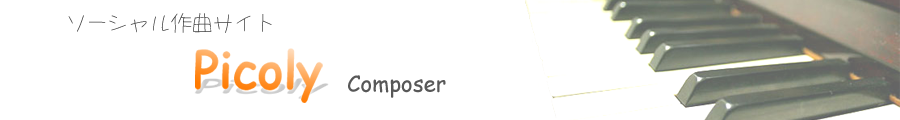
<style>
.page{position:relative;width:900px;height:120px;background:#ffffff}
.page>*{position:absolute;margin:0}
.t1{font:21.1px "S2G-love";color:#424242}
.t2{font:22.1px "ComicSansMS";color:#585858}
</style>
<div class="page">
<p class="t1" style="left:68px;top:13px;width:204px;height:20px">ソーシャル作曲サイト</p>
<p class="t2" style="left:348px;top:75px;width:98px;height:23px">Composer</p>
</div>
